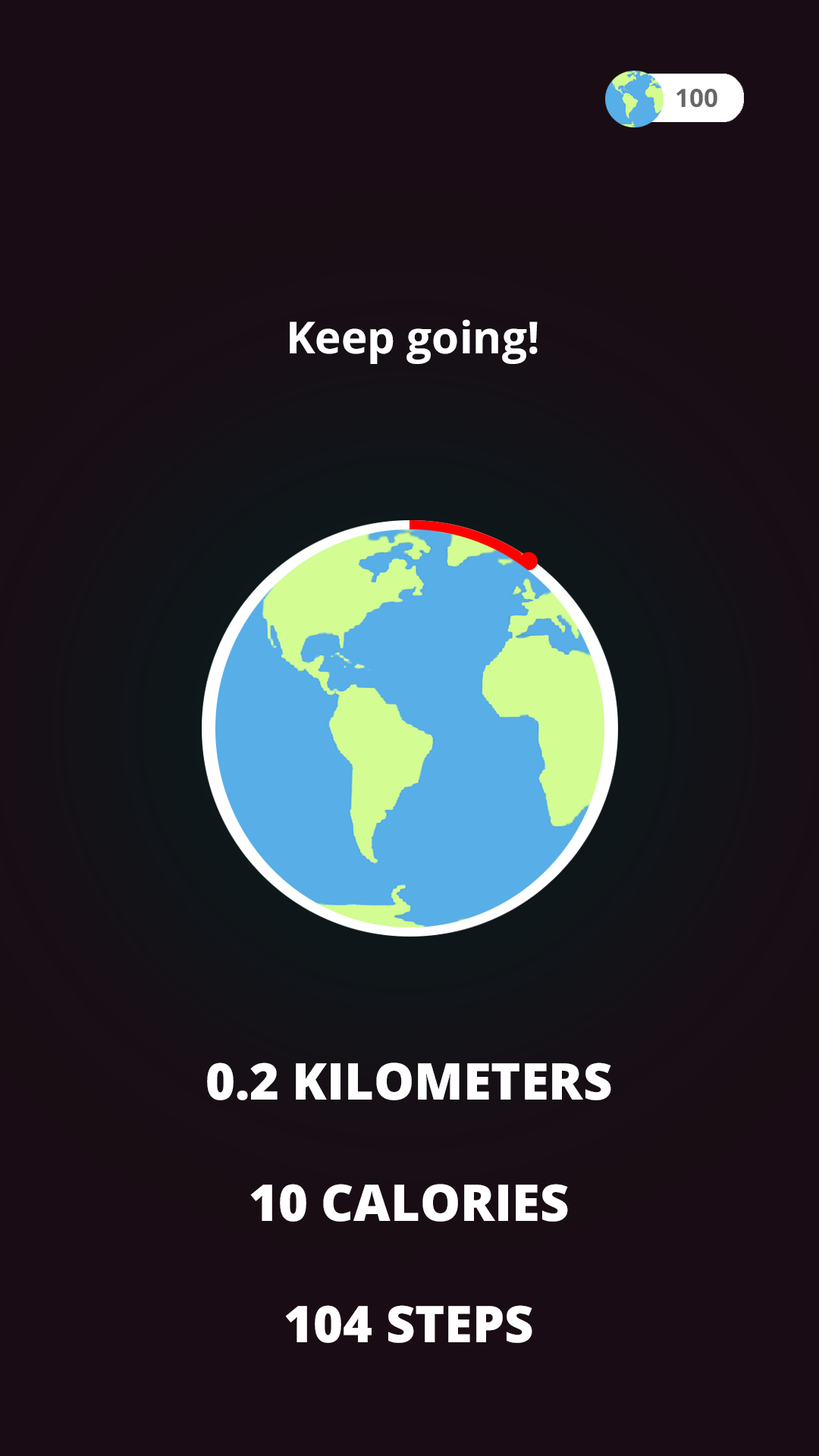
<style>
.page{position:relative;width:819px;height:1456px;background:#1a0c14}
.page>*{position:absolute;margin:0}
.t1{font:25.3px "OpenSans-Bold";color:#666666}
.t2{font:44.2px "OpenSans-Bold";color:#ffffff}
.t3{font:50.6px "OpenSans-Extrabold";color:#ffffff}
</style>
<div class="page">
<p class="t1" style="left:676px;top:89px;width:41px;height:19px">100</p>
<p class="t2" style="left:290px;top:319px;width:248px;height:45px">Keep going!</p>
<p class="t3" style="left:207px;top:1062px;width:404px;height:281px;text-align:center">0.2 KILOMETERS<br><br>10 CALORIES<br><br>104 STEPS</p>
</div>
